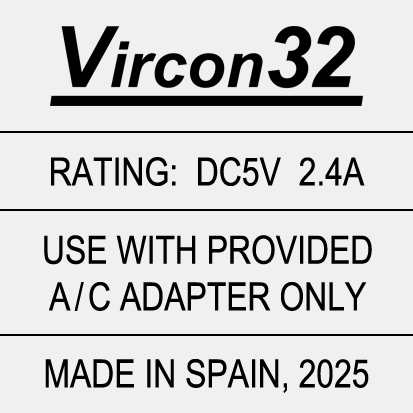
<style>
.page{position:relative;width:413px;height:413px;background:#f0f0f0}
.page>*{position:absolute;margin:0}
.t1{font:38.9px "ArialNarrow";color:#000000}
</style>
<div class="page">
<p class="t1" style="left:51px;top:157px;width:314px;height:29px">RATING:  DC5V  2.4A</p>
<p class="t1" style="left:44px;top:235px;width:328px;height:76px;text-align:center">USE WITH PROVIDED<br>A / C ADAPTER ONLY</p>
<p class="t1" style="left:45px;top:359px;width:324px;height:34px">MADE IN SPAIN, 2025</p>
</div>
